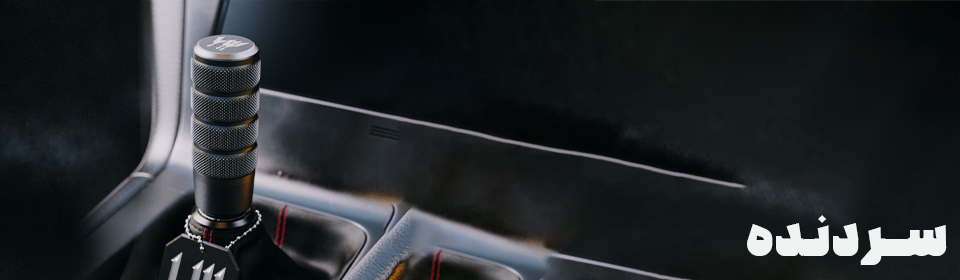
<style>
.page{position:relative;width:960px;height:280px}
.page>*{position:absolute;margin:0}
.t1{font:67.6px "Kaghaz-Bold";color:#eff3f2}
</style>
<div class="page">
<p class="t1" style="left:747px;top:215px;width:200px;height:50px">ســر دنـده</p>
</div>
